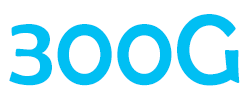
<style>
.page{position:relative;width:250px;height:100px;background:#ffffff}
.page>*{position:absolute;margin:0}
.t1{font:100px "BerlinSansFB-Reg";color:#00bff3}
</style>
<div class="page">
<p class="t1" style="left:9px;top:14px;width:231px;height:72px">300G</p>
</div>
